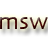
<style>
.page{position:relative;width:48px;height:48px;background:#ffffff}
.page>*{position:absolute;margin:0}
.t1{font:24px "Skia-Regular"}
</style>
<div class="page">
<p class="t1" style="left:0px;top:17px;width:48px;height:12px">msw</p>
</div>
